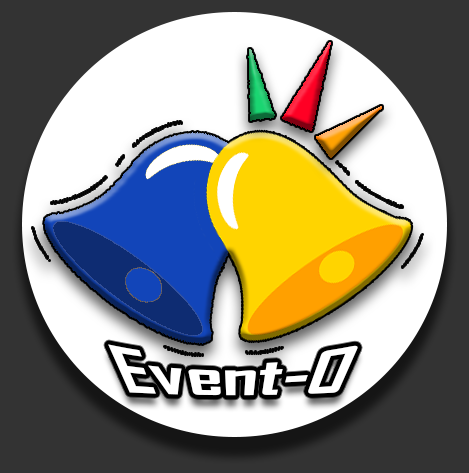
<style>
.page{position:relative;width:469px;height:473px;background:#333333}
.page>*{position:absolute;margin:0}
.t1{font:72px "AgencyFB-Bold";color:#ffffff;scale:1.23 1}
</style>
<div class="page">
<p class="t1" style="left:108px;top:344px;width:250px;height:52px">Event-O</p>
</div>
